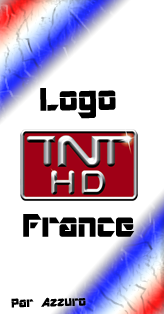
<style>
.page{position:relative;width:164px;height:314px;background:#ffffff}
.page>*{position:absolute;margin:0}
.t1{font:36px "ARDESTINE";color:#000000}
.t2{font:14px "ARDESTINE";color:#000000}
</style>
<div class="page">
<p class="t1" style="left:40px;top:88px;width:76px;height:31px;rotate:-1deg">Logo</p>
<p class="t1" style="left:23px;top:214px;width:112px;height:23px">France</p>
<p class="t2" style="left:11px;top:297px;width:75px;height:11px;rotate:-2deg">Par Azzuro</p>
</div>
